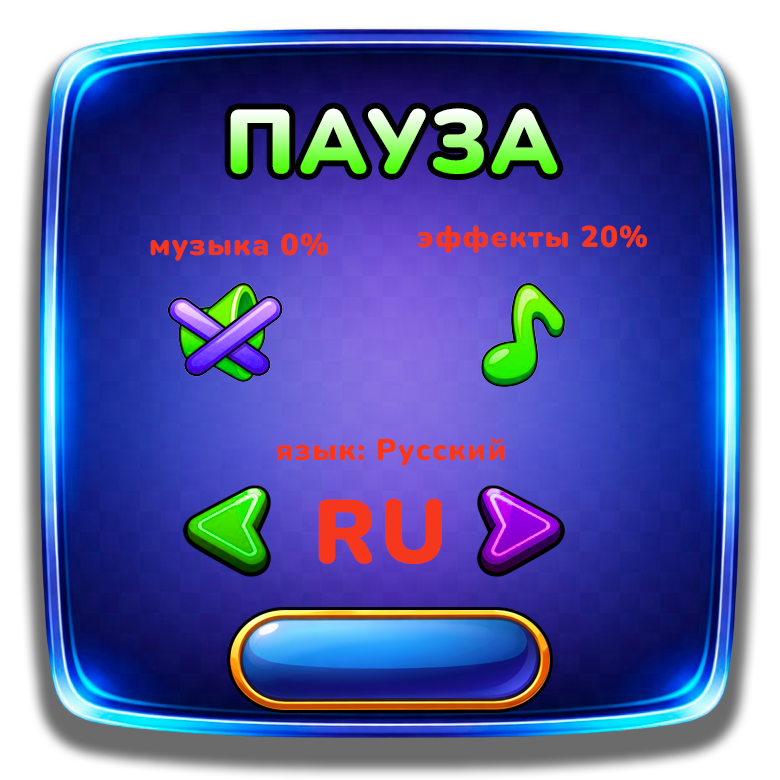
<style>
.page{position:relative;width:780px;height:780px}
.page>*{position:absolute;margin:0}
.t1{font:90px "Nunito-Black";letter-spacing:0.04em}
.t2{font:30px "Nunito-Black";letter-spacing:0.04em;color:#f4371d}
.t3{font:90px "Nunito-Black";letter-spacing:0.04em;color:#f4371d}
</style>
<div class="page">
<p class="t1" style="left:230px;top:108px;width:328px;height:66px">ПАУЗА</p>
<p class="t2" style="left:150px;top:233px;width:178px;height:28px">музыка 0%</p>
<p class="t2" style="left:418px;top:225px;width:229px;height:28px">эффекты 20%</p>
<p class="t2" style="left:276px;top:438px;width:229px;height:28px">язык: Русский</p>
<p class="t3" style="left:318px;top:498px;width:124px;height:66px">RU</p>
</div>
